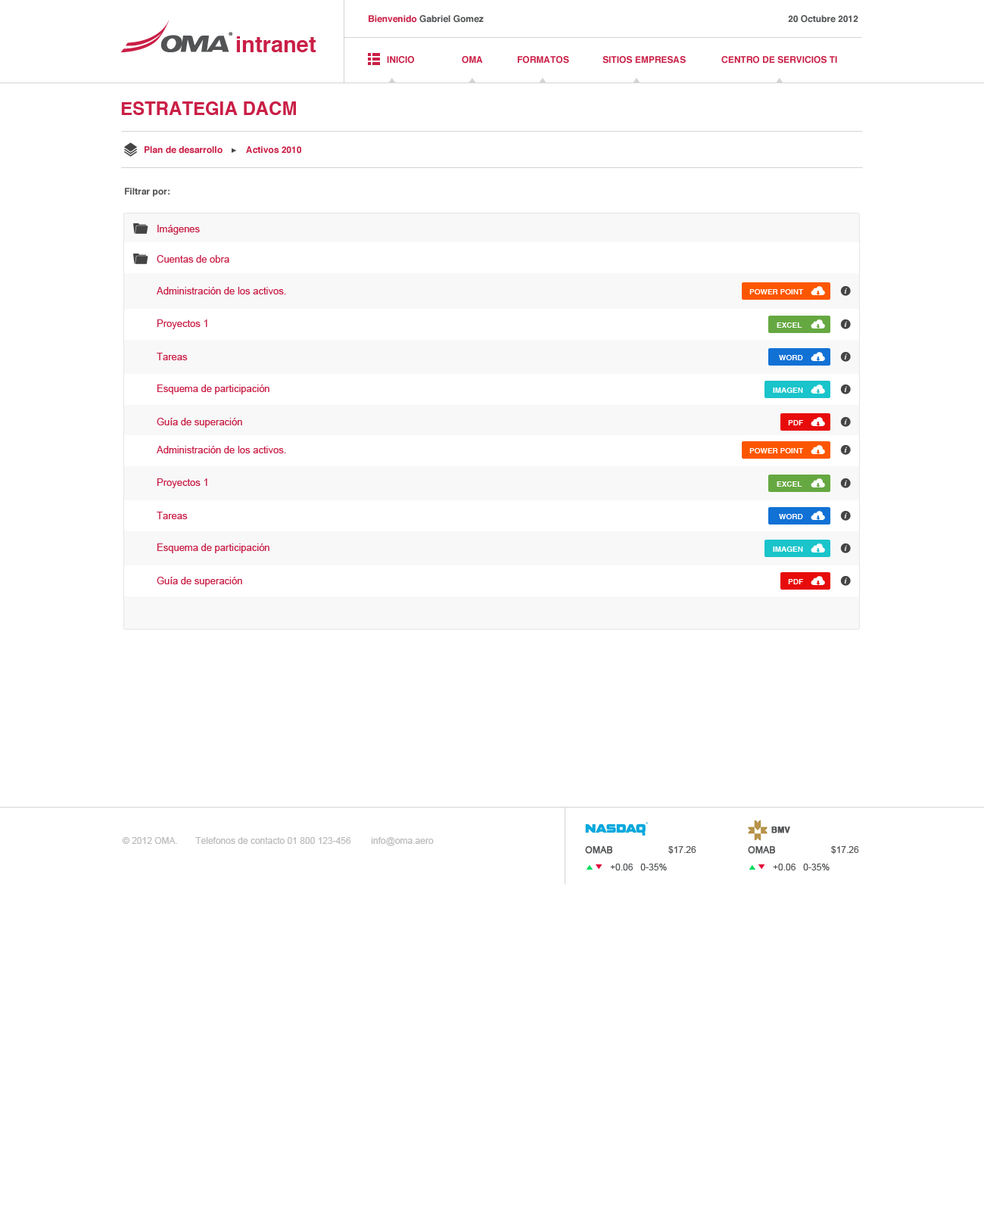
<style>
.page{position:relative;width:984px;height:1211px;background:#ffffff}
.page>*{position:absolute;margin:0}
.t1{font:9.1px "Helvetica-Bold";color:#515355}
.t2{font:9.1px "Helvetica-Bold";color:#c91f46}
.t3{font:22px "Helvetica-Bold";color:#c91f46}
.t4{font:9.1px "Helvetica-Bold";color:#c91f46;text-transform:uppercase}
.t5{font:18.2px "Helvetica-Bold";color:#c91f46;text-transform:uppercase}
.t6{font:9.8px "ArialMT";color:#c91f46}
.t7{font:7.6px "Helvetica-Bold";color:#ffffff;text-transform:uppercase}
.t8{font:8.2px "Helvetica-Bold";color:#515355;font-weight:bold}
.t9{font:9.1px "ArialMT";color:#b9b9b9}
.t10{font:9.1px "ArialMT";color:#515355;font-weight:bold}
.t11{font:9.1px "ArialMT";color:#515355}
</style>
<div class="page">
<p class="t1" style="left:369px;top:15px;width:115px;height:8px"><span class="t2">Bienvenido</span> Gabriel Gomez</p>
<p class="t1" style="left:788px;top:15px;width:71px;height:8px">20 Octubre 2012</p>
<p class="t3" style="left:236px;top:36px;width:80px;height:16px">intranet</p>
<p class="t2" style="left:387px;top:56px;width:27px;height:8px">INICIO</p>
<p class="t2" style="left:462px;top:56px;width:21px;height:8px">OMA</p>
<p class="t4" style="left:518px;top:56px;width:51px;height:8px">formatos</p>
<p class="t4" style="left:603px;top:56px;width:83px;height:8px">sitios empresas</p>
<p class="t4" style="left:722px;top:56px;width:115px;height:8px">centro de servicios ti</p>
<p class="t5" style="left:121px;top:101px;width:175px;height:14px">Estrategia DACM</p>
<p class="t2" style="left:145px;top:146px;width:78px;height:8px">Plan de desarrollo</p>
<p class="t2" style="left:246px;top:146px;width:55px;height:8px">Activos 2010</p>
<p class="t1" style="left:125px;top:188px;width:45px;height:9px">Filtrar por:</p>
<p class="t6" style="left:157px;top:225px;width:43px;height:10px">Imágenes</p>
<p class="t6" style="left:157px;top:255px;width:72px;height:8px">Cuentas de obra</p>
<p class="t6" style="left:157px;top:287px;width:129px;height:8px">Administración de los activos.</p>
<p class="t7" style="left:750px;top:289px;width:54px;height:6px">Power point</p>
<p class="t6" style="left:157px;top:320px;width:50px;height:9px">Proyectos 1</p>
<p class="t7" style="left:777px;top:323px;width:26px;height:5px">excel</p>
<p class="t6" style="left:157px;top:353px;width:31px;height:7px">Tareas</p>
<p class="t7" style="left:779px;top:355px;width:24px;height:5px">word</p>
<p class="t6" style="left:157px;top:385px;width:113px;height:9px">Esquema de participación</p>
<p class="t7" style="left:773px;top:388px;width:30px;height:5px">Imagen</p>
<p class="t6" style="left:157px;top:418px;width:85px;height:10px">Guía de superación</p>
<p class="t7" style="left:788px;top:420px;width:15px;height:6px">PDF</p>
<p class="t6" style="left:157px;top:446px;width:129px;height:8px">Administración de los activos.</p>
<p class="t7" style="left:750px;top:448px;width:54px;height:6px">Power point</p>
<p class="t6" style="left:157px;top:479px;width:50px;height:9px">Proyectos 1</p>
<p class="t7" style="left:777px;top:482px;width:26px;height:5px">excel</p>
<p class="t6" style="left:157px;top:512px;width:31px;height:7px">Tareas</p>
<p class="t7" style="left:779px;top:514px;width:24px;height:5px">word</p>
<p class="t6" style="left:157px;top:544px;width:113px;height:9px">Esquema de participación</p>
<p class="t7" style="left:773px;top:547px;width:30px;height:5px">Imagen</p>
<p class="t6" style="left:157px;top:577px;width:85px;height:10px">Guía de superación</p>
<p class="t7" style="left:788px;top:579px;width:15px;height:6px">PDF</p>
<p class="t8" style="left:772px;top:827px;width:18px;height:7px">BMV</p>
<p class="t9" style="left:122px;top:837px;width:312px;height:10px">© 2012 OMA.       Telefonos de contacto 01 800 123-456        info@oma.aero</p>
<p class="t10" style="left:585px;top:847px;width:28px;height:7px">OMAB</p>
<p class="t11" style="left:669px;top:847px;width:28px;height:7px">$17.26</p>
<p class="t10" style="left:748px;top:847px;width:27px;height:7px">OMAB</p>
<p class="t11" style="left:831px;top:847px;width:28px;height:7px">$17.26</p>
<p class="t11" style="left:610px;top:864px;width:57px;height:7px">+0.06   0-35%</p>
<p class="t11" style="left:773px;top:864px;width:57px;height:7px">+0.06   0-35%</p>
</div>
